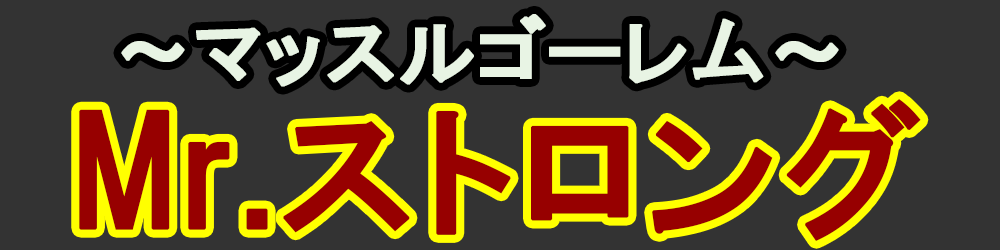
<style>
.page{position:relative;width:1000px;height:250px;background:#333333}
.page>*{position:absolute;margin:0}
.t1{font:76.4px "HGPGothicE";color:#e8f4e4;font-weight:bold}
.t2{font:146.7px "HGPGothicE";color:#970000;font-weight:bold}
</style>
<div class="page">
<p class="t1" style="left:121px;top:14px;width:718px;height:73px">～マッスルゴーレム～</p>
<p class="t2" style="left:79px;top:99px;width:842px;height:142px">Mr.ストロング</p>
</div>
